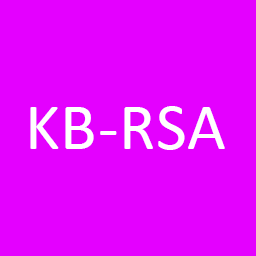
<style>
.page{position:relative;width:256px;height:256px;background:#e400ff}
.page>*{position:absolute;margin:0}
.t1{font:66.7px "Calibri";letter-spacing:0.018em;color:#ffffff}
</style>
<div class="page">
<p class="t1" style="left:30px;top:106px;width:195px;height:44px">KB-RSA</p>
</div>
